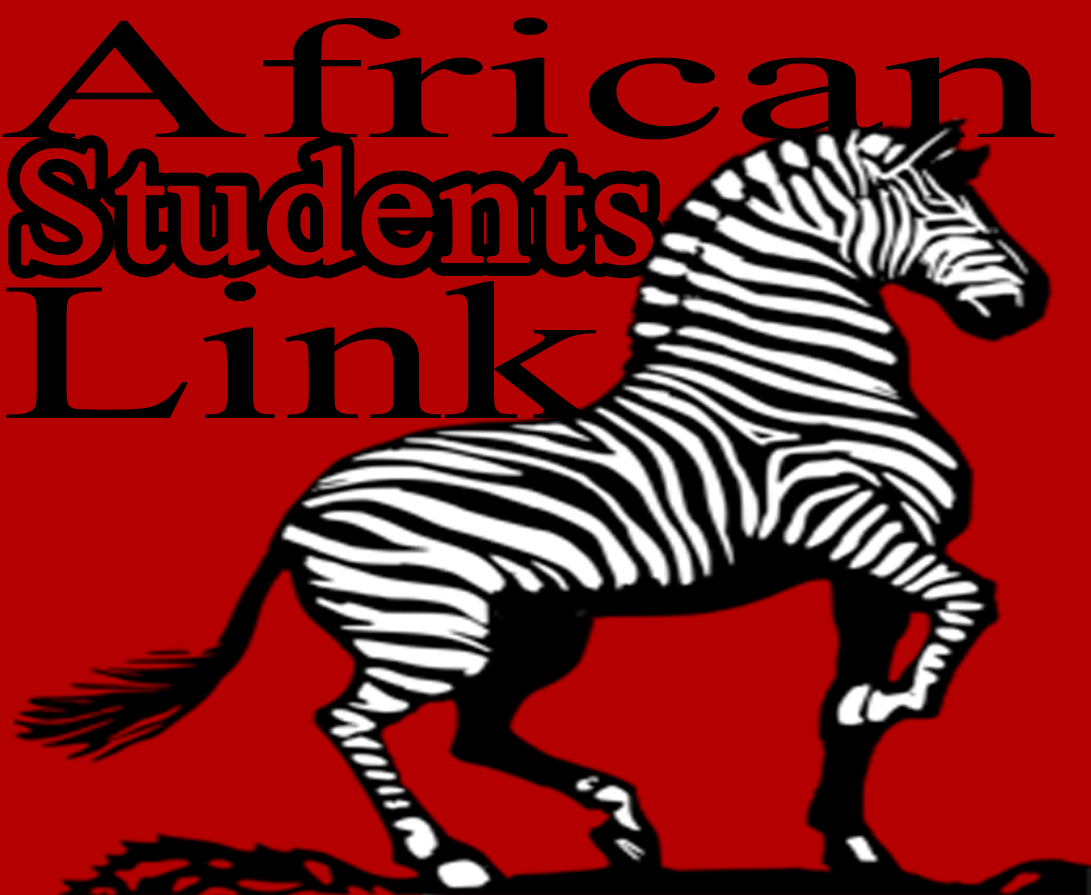
<style>
.page{position:relative;width:1091px;height:895px;background:#b40000}
.page>*{position:absolute;margin:0}
.t1{font:171.6px "TimesNewRomanPSMT";color:#000000;scale:2.02 1}
.t2{font:163.3px "TimesNewRomanPSMT";color:#b40000;font-weight:bold;scale:1.09 1}
.t3{font:196.5px "TimesNewRomanPSMT";color:#000000;scale:1.62 1}
</style>
<div class="page">
<p class="t1" style="left:2px;top:17px;width:1053px;height:123px">African</p>
<p class="t2" style="left:20px;top:145px;width:633px;height:121px">Students</p>
<p class="t3" style="left:6px;top:281px;width:597px;height:137px">Link</p>
</div>
